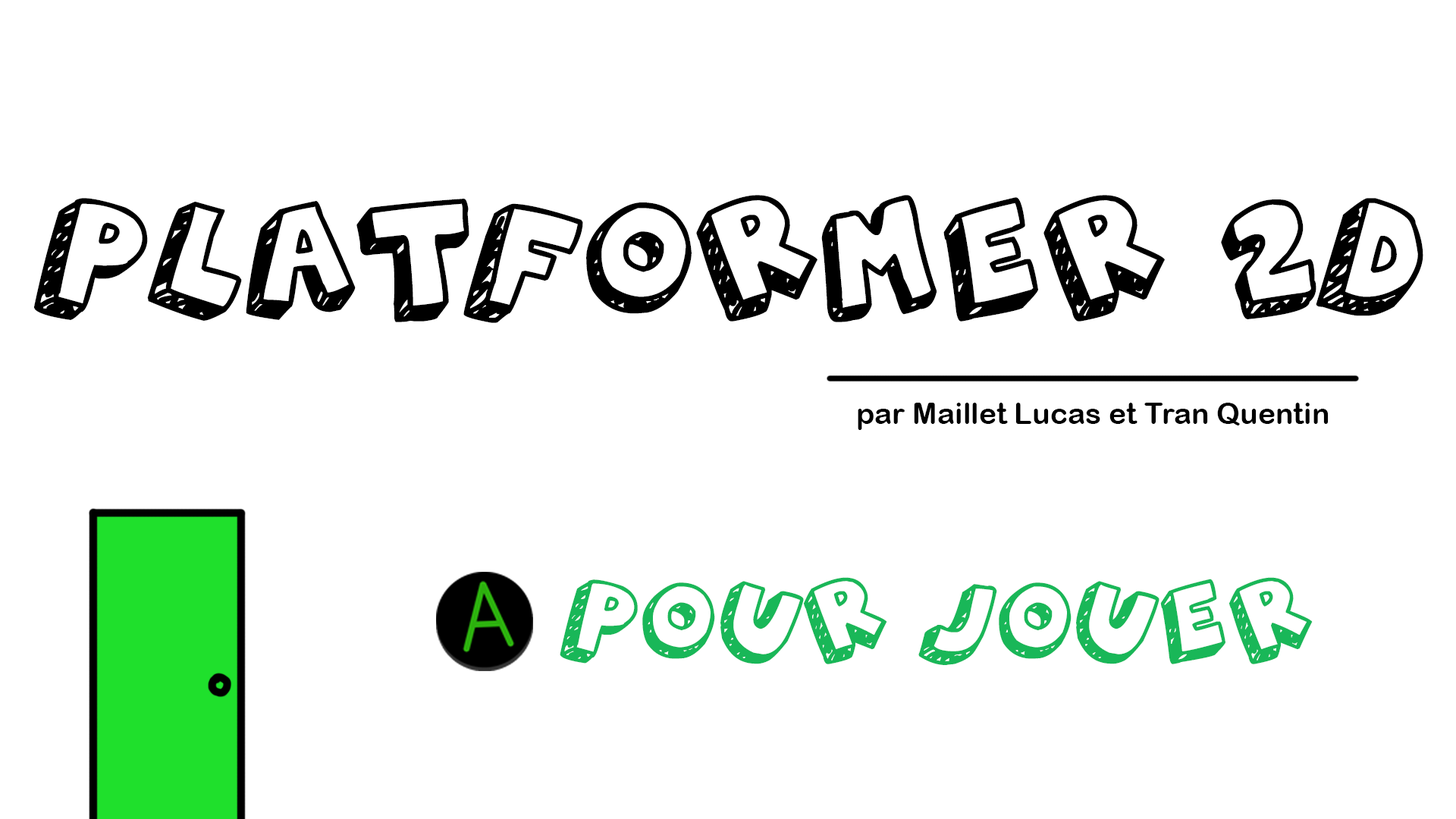
<style>
.page{position:relative;width:1456px;height:819px;background:#ffffff}
.page>*{position:absolute;margin:0}
.t1{font:63.7px "3DHandDrawns";color:#000000}
.t2{font:29.5px "ArialRoundedMTBold";color:#000000}
.t3{font:43.6px "3DHandDrawns";color:#19b758}
</style>
<div class="page">
<p class="t1" style="left:34px;top:195px;width:1389px;height:128px;text-align:center">Platformer 2D</p>
<p class="t2" style="left:858px;top:403px;width:471px;height:27px">par Maillet Lucas et Tran Quentin</p>
<p class="t3" style="left:560px;top:577px;width:753px;height:88px;text-align:center">pour jouer</p>
</div>
